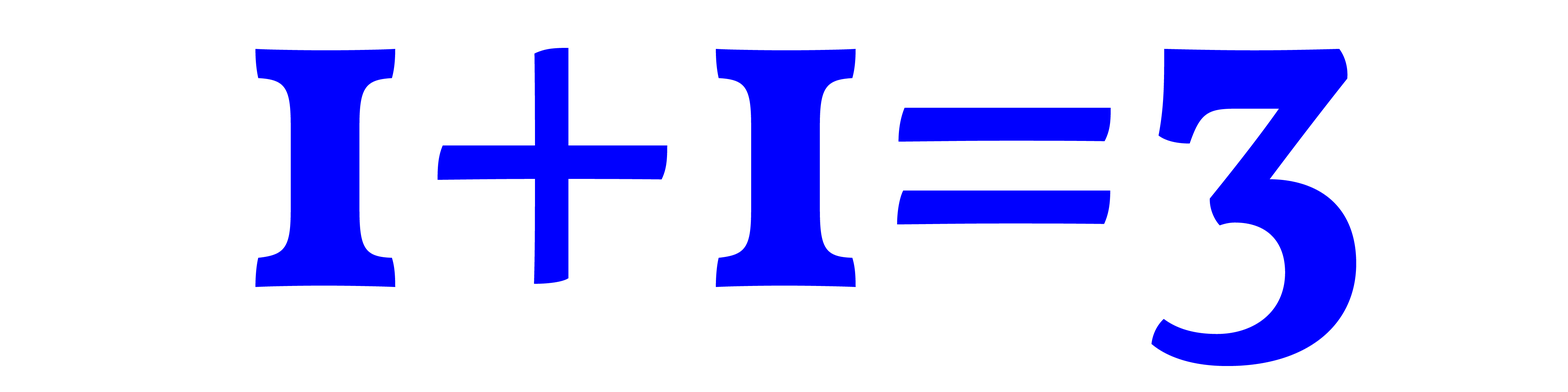
<style>
.page{position:relative;width:1568px;height:392px;background:#ffffff}
.page>*{position:absolute;margin:0}
.t1{font:470.4px "Vollkorn-Semibold";color:#0000ff}
</style>
<div class="page">
<p class="t1" style="left:255px;top:48px;width:1101px;height:318px">1+1=3</p>
</div>
